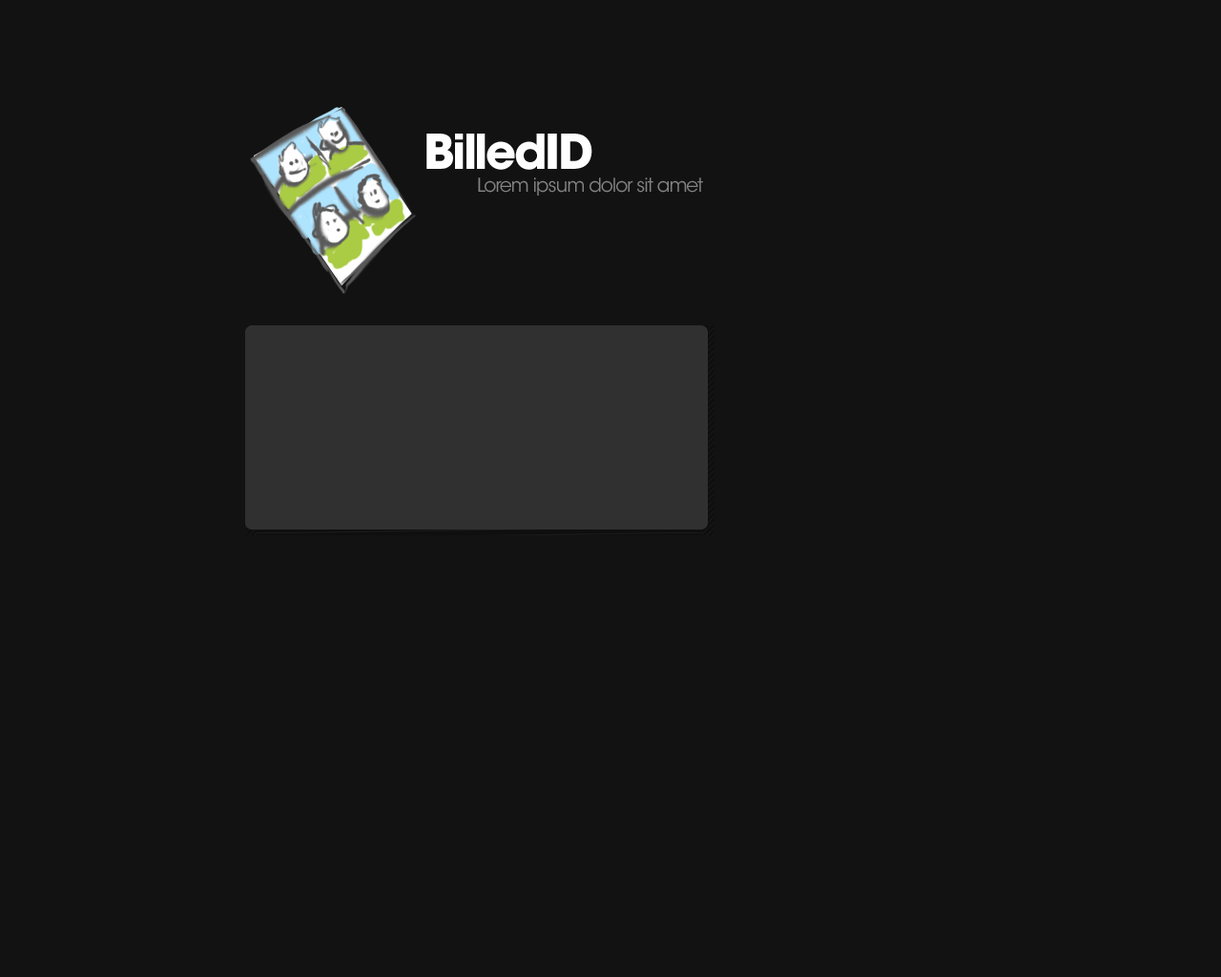
<style>
.page{position:relative;width:1221px;height:977px;background:#121212}
.page>*{position:absolute;margin:0}
.t1{font:47.7px "ITCAvantGardeStd-Bold";letter-spacing:-0.05em;color:#fefefe}
.t2{font:47.7px "ITCAvantGardeStd-Bold";letter-spacing:-0.05em;color:#fefefe;text-transform:uppercase}
.t3{font:19.1px "ITCAvantGardeStd-Bk";letter-spacing:-0.05em;color:#838383}
</style>
<div class="page">
<p class="t1" style="left:426px;top:134px;width:166px;height:36px"><span class="t2">b</span>illedID</p>
<p class="t3" style="left:478px;top:177px;width:225px;height:19px">Lorem ipsum dolor sit amet</p>
</div>
